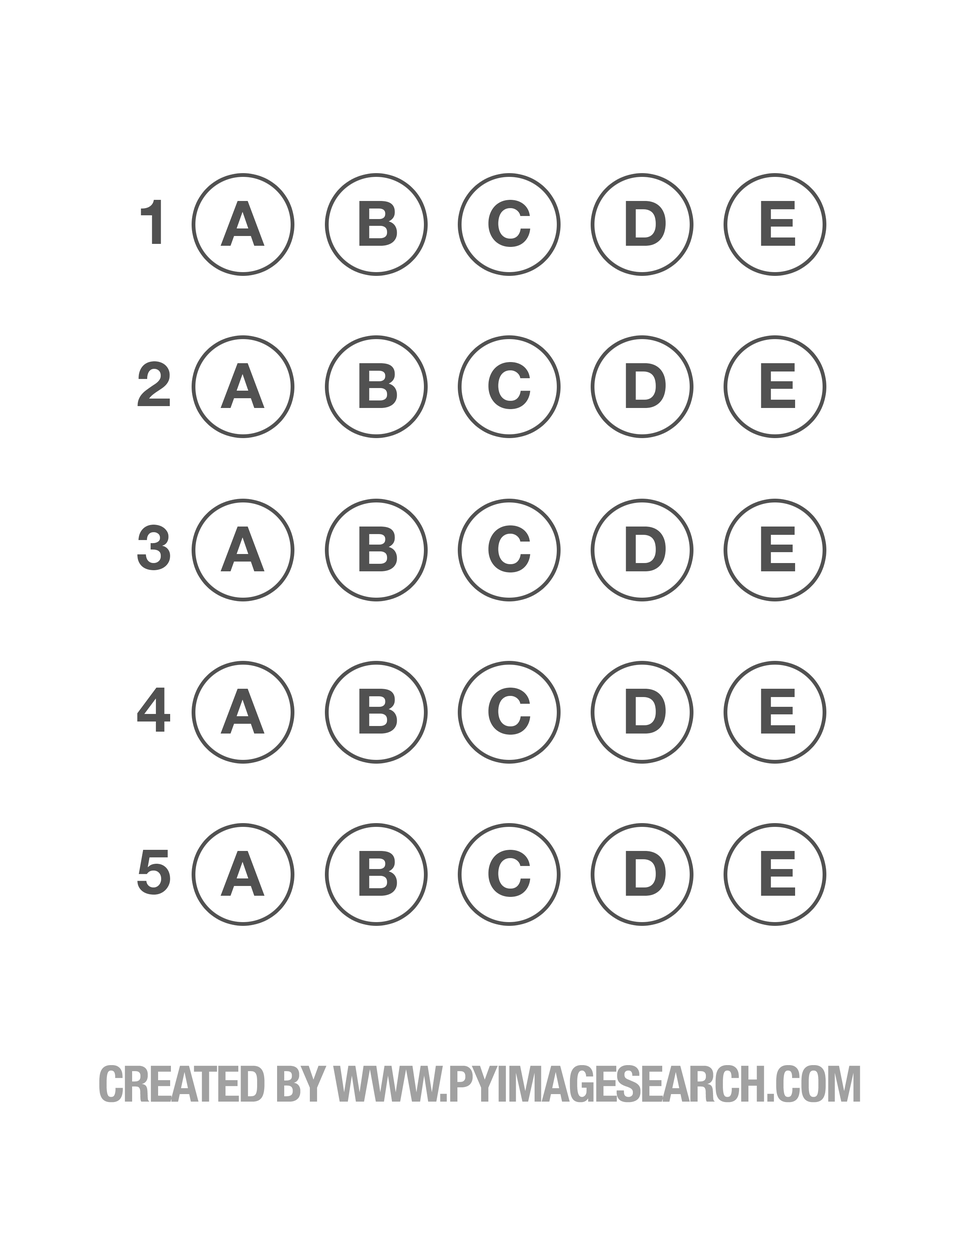
<style>
.page{position:relative;width:960px;height:1242px;background:#ffffff}
.page>*{position:absolute;margin:0}
.t1{font:62.7px "HelveticaNeue-Bold";letter-spacing:-0.04em;color:#515151}
.t2{font:50.2px "HelveticaNeue-CondensedBold";letter-spacing:-0.04em;color:#a1a1a1}
</style>
<div class="page">
<p class="t1" style="left:141px;top:200px;width:20px;height:44px">1</p>
<p class="t1" style="left:221px;top:201px;width:44px;height:45px">A</p>
<p class="t1" style="left:359px;top:201px;width:38px;height:45px">B</p>
<p class="t1" style="left:488px;top:200px;width:42px;height:47px">C</p>
<p class="t1" style="left:626px;top:201px;width:40px;height:45px">D</p>
<p class="t1" style="left:761px;top:201px;width:34px;height:45px">E</p>
<p class="t1" style="left:137px;top:361px;width:33px;height:45px">2</p>
<p class="t1" style="left:221px;top:363px;width:44px;height:45px">A</p>
<p class="t1" style="left:359px;top:363px;width:38px;height:45px">B</p>
<p class="t1" style="left:488px;top:362px;width:42px;height:47px">C</p>
<p class="t1" style="left:626px;top:363px;width:40px;height:45px">D</p>
<p class="t1" style="left:761px;top:363px;width:34px;height:45px">E</p>
<p class="t1" style="left:137px;top:525px;width:33px;height:45px">3</p>
<p class="t1" style="left:221px;top:527px;width:44px;height:44px">A</p>
<p class="t1" style="left:359px;top:527px;width:38px;height:44px">B</p>
<p class="t1" style="left:488px;top:526px;width:42px;height:47px">C</p>
<p class="t1" style="left:626px;top:527px;width:40px;height:44px">D</p>
<p class="t1" style="left:761px;top:527px;width:34px;height:44px">E</p>
<p class="t1" style="left:137px;top:688px;width:33px;height:44px">4</p>
<p class="t1" style="left:221px;top:689px;width:44px;height:45px">A</p>
<p class="t1" style="left:359px;top:689px;width:38px;height:45px">B</p>
<p class="t1" style="left:488px;top:688px;width:42px;height:47px">C</p>
<p class="t1" style="left:626px;top:689px;width:40px;height:45px">D</p>
<p class="t1" style="left:761px;top:689px;width:34px;height:45px">E</p>
<p class="t1" style="left:137px;top:850px;width:33px;height:45px">5</p>
<p class="t1" style="left:221px;top:851px;width:44px;height:45px">A</p>
<p class="t1" style="left:359px;top:851px;width:38px;height:45px">B</p>
<p class="t1" style="left:488px;top:850px;width:42px;height:47px">C</p>
<p class="t1" style="left:626px;top:851px;width:40px;height:45px">D</p>
<p class="t1" style="left:761px;top:851px;width:34px;height:45px">E</p>
<p class="t2" style="left:99px;top:1065px;width:761px;height:38px">CREATED BY WWW.PYIMAGESEARCH.COM</p>
</div>
